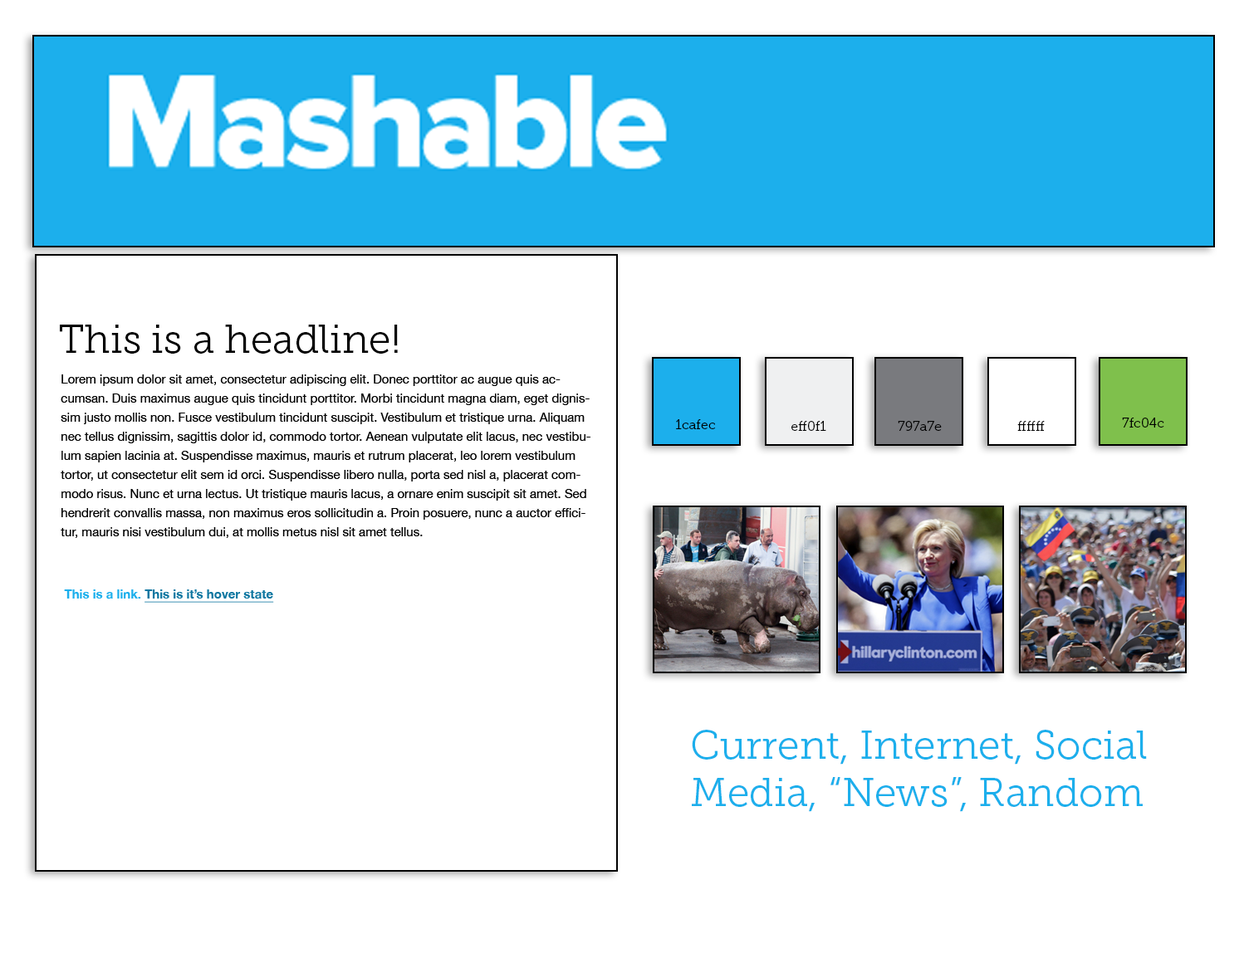
<style>
.page{position:relative;width:1244px;height:958px;background:#ffffff}
.page>*{position:absolute;margin:0}
.t1{font:39.9px "MuseoSlab-300";color:#000000}
.t2{font:12.5px/19.1px "HelveticaNeue";color:#000000}
.t3{font:13.3px "MuseoSlab-300";color:#000000}
.t4{font:12.5px "HelveticaNeue-Bold";color:#0f77a1;text-decoration:underline}
.t5{font:12.5px "HelveticaNeue-Bold";color:#1cafec}
.t6{font:39.9px "MuseoSlab-300";color:#1cafec}
</style>
<div class="page">
<p class="t1" style="left:60px;top:325px;width:338px;height:29px">This is a headline!</p>
<p class="t2" style="left:61px;top:375px;width:530px;height:163px">Lorem ipsum dolor sit amet, consectetur adipiscing elit. Donec porttitor ac augue quis accumsan. Duis maximus augue quis tincidunt porttitor. Morbi tincidunt magna diam, eget dignissim justo mollis non. Fusce vestibulum tincidunt suscipit. Vestibulum et tristique urna. Aliquam nec tellus dignissim, sagittis dolor id, commodo tortor. Aenean vulputate elit lacus, nec vestibulum sapien lacinia at. Suspendisse maximus, mauris et rutrum placerat, leo lorem vestibulum tortor, ut consectetur elit sem id orci. Suspendisse libero nulla, porta sed nisl a, placerat commodo risus. Nunc et urna lectus. Ut tristique mauris lacus, a ornare enim suscipit sit amet. Sed hendrerit convallis massa, non maximus eros sollicitudin a. Proin posuere, nunc a auctor efficitur, mauris nisi vestibulum dui, at mollis metus nisl sit amet tellus.</p>
<p class="t3" style="left:676px;top:419px;width:40px;height:10px">1cafec</p>
<p class="t3" style="left:792px;top:421px;width:34px;height:10px">eff0f1</p>
<p class="t3" style="left:898px;top:421px;width:44px;height:10px">797a7e</p>
<p class="t3" style="left:1017px;top:421px;width:28px;height:10px">ffffff</p>
<p class="t3" style="left:1122px;top:418px;width:42px;height:10px">7fc04c</p>
<p class="t4" style="left:64px;top:590px;width:210px;height:13px"><span class="t5">This is a link. </span>This is it’s hover state</p>
<p class="t6" style="left:692px;top:730px;width:455px;height:82px">Current, Internet, Social<br>Media, “News”, Random</p>
</div>
